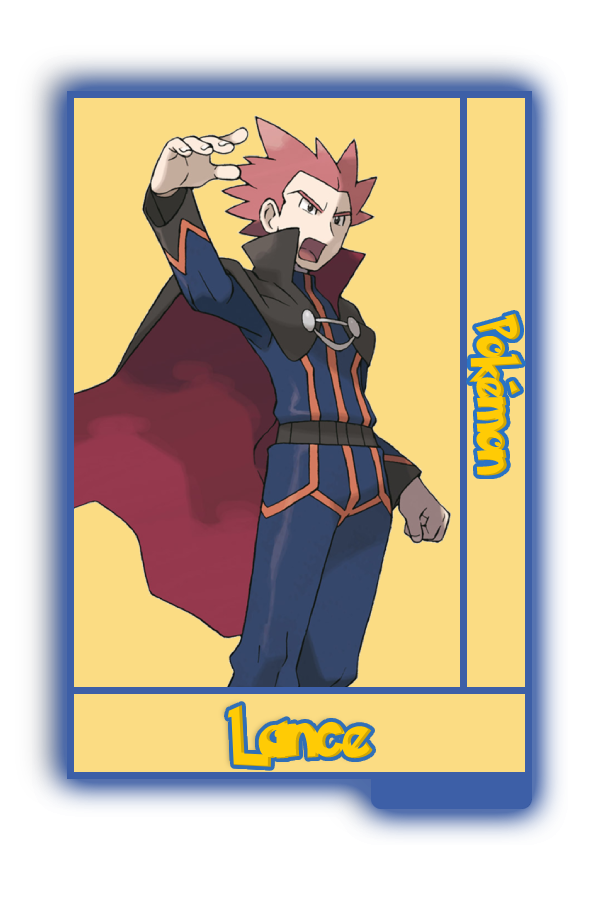
<style>
.page{position:relative;width:600px;height:900px;background:#fbdc83}
.page>*{position:absolute;margin:0}
.t1{font:48.8px "PokemonSolidNormal";color:#ffcb05;scale:0.8 1}
.t2{font:56.6px "PokemonSolidNormal";color:#ffcb05;scale:0.92 1}
</style>
<div class="page">
<p class="t1" style="left:469px;top:313px;width:54px;height:163px;rotate:90deg">Pokémon</p>
<p class="t2" style="left:227px;top:704px;width:146px;height:63px">Lance</p>
</div>
